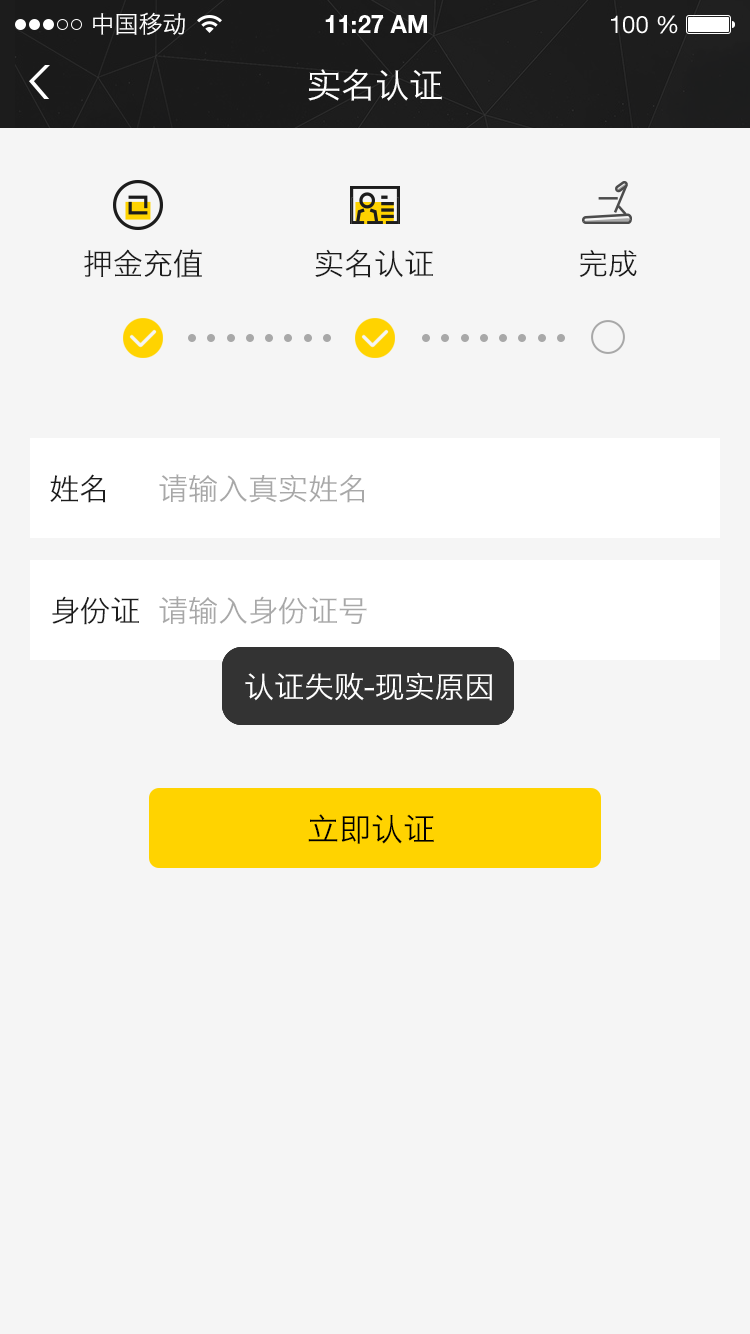
<style>
.page{position:relative;width:750px;height:1334px;background:#f5f5f5}
.page>*{position:absolute;margin:0}
.t1{font:24px "HiraginoSansGB-W3";color:#ffffff}
.t2{font:24px "HelveticaNeueLTStd-Bd";color:#ffffff}
.t3{font:24px "HelveticaNeueLTStd-Roman";color:#ffffff}
.t4{font:34px "HiraginoSansGB-W3";color:#ffffff}
.t5{font:30px "HiraginoSansGB-W3";color:#1c1c1c}
.t6{font:30px "HiraginoSansGB-W3";color:#a8a8a8}
.t7{font:30px "HiraginoSansGB-W3";color:#ffffff}
.t8{font:32px "HiraginoSansGB-W3";color:#000000}
</style>
<div class="page">
<p class="t1" style="left:93px;top:12px;width:92px;height:23px">中国移动</p>
<p class="t2" style="left:325px;top:15px;width:102px;height:18px">11:27 AM</p>
<p class="t3" style="left:611px;top:15px;width:67px;height:19px">100 %</p>
<p class="t4" style="left:308px;top:69px;width:134px;height:32px">实名认证</p>
<p class="t5" style="left:84px;top:249px;width:118px;height:29px">押金充值</p>
<p class="t5" style="left:315px;top:249px;width:118px;height:29px">实名认证</p>
<p class="t5" style="left:579px;top:249px;width:58px;height:28px">完成</p>
<p class="t5" style="left:50px;top:474px;width:56px;height:29px">姓名</p>
<p class="t6" style="left:159px;top:474px;width:206px;height:29px">请输入真实姓名</p>
<p class="t5" style="left:52px;top:596px;width:87px;height:29px">身份证</p>
<p class="t6" style="left:159px;top:596px;width:208px;height:29px">请输入身份证号</p>
<p class="t7" style="left:245px;top:672px;width:247px;height:29px">认证失败-现实原因</p>
<p class="t8" style="left:308px;top:814px;width:126px;height:30px">立即认证</p>
</div>
